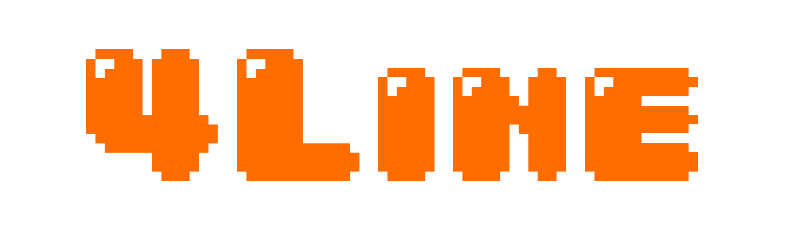
<style>
.page{position:relative;width:800px;height:250px;background:#ffffff}
.page>*{position:absolute;margin:0}
.t1{font:160px "04b30";color:#ff6c00}
</style>
<div class="page">
<p class="t1" style="left:86px;top:49px;width:612px;height:132px">4Line</p>
</div>
